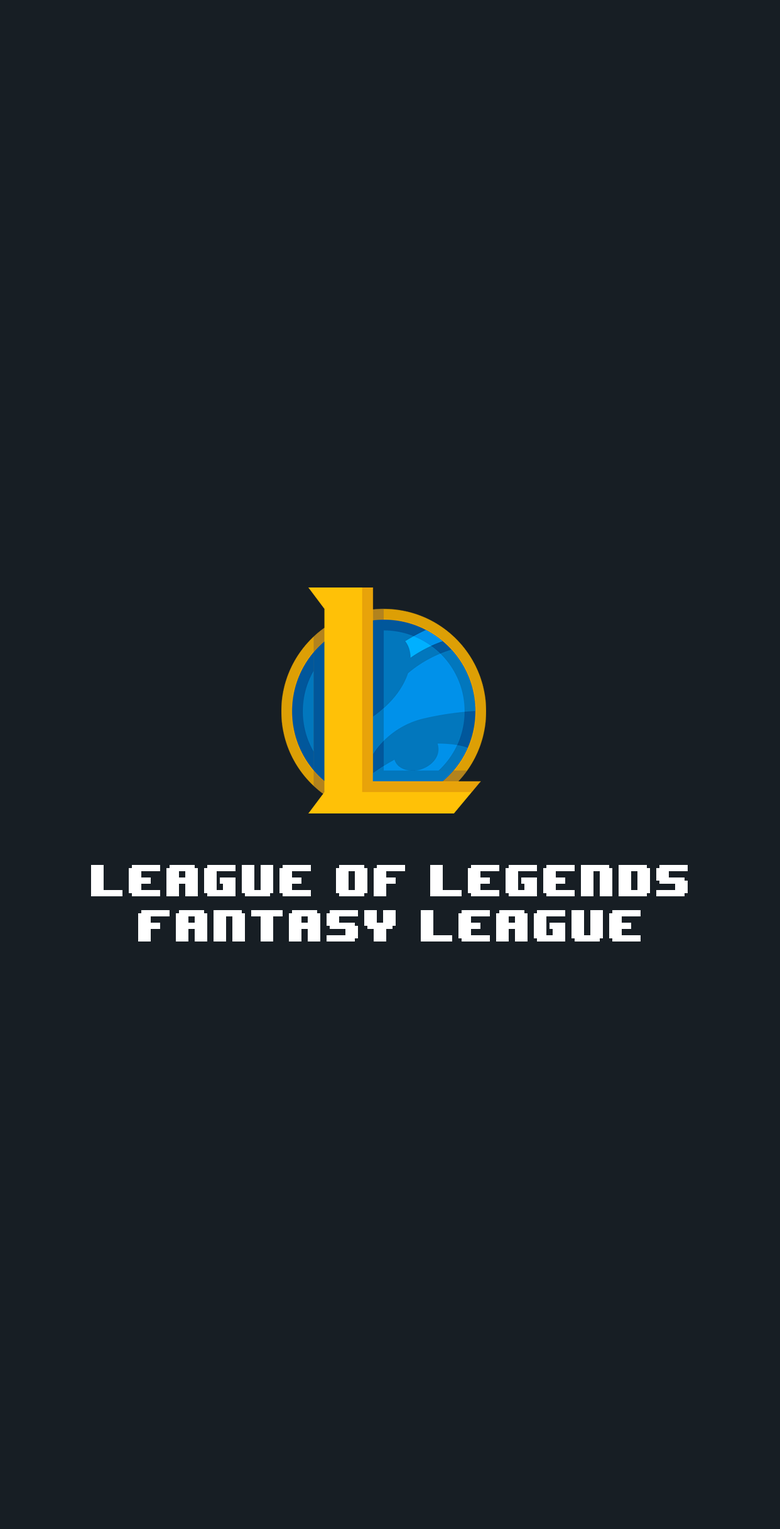
<style>
.page{position:relative;width:780px;height:1529px;background:#171e24}
.page>*{position:absolute;margin:0}
.t1{font:37.7px "8BITWONDERNominal";color:#ffffff}
</style>
<div class="page">
<p class="t1" style="left:91px;top:865px;width:596px;height:77px;text-align:center">League of Legends<br>Fantasy League</p>
</div>
